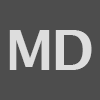
<style>
.page{position:relative;width:100px;height:100px;background:#4d4d4d}
.page>*{position:absolute;margin:0}
.t1{font:54px "LucidaGrande-Bold";letter-spacing:-0.05em;color:#dddddd}
</style>
<div class="page">
<p class="t1" style="left:9px;top:30px;width:83px;height:40px">MD</p>
</div>
